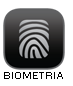
<style>
.page{position:relative;width:73px;height:86px;background:#ffffff}
.page>*{position:absolute;margin:0}
.t1{font:8.9px "Small Fonts";letter-spacing:0.1em;color:#000000;scale:1.06 1}
</style>
<div class="page">
<p class="t1" style="left:4px;top:72px;width:59px;height:7px">BIOMETRIA</p>
</div>
